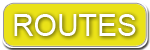
<style>
.page{position:relative;width:150px;height:50px;background:#eae218}
.page>*{position:absolute;margin:0}
.t1{font:30px "ArialMT";color:#ffffff}
</style>
<div class="page">
<p class="t1" style="left:14px;top:14px;width:122px;height:22px">ROUTES</p>
</div>
